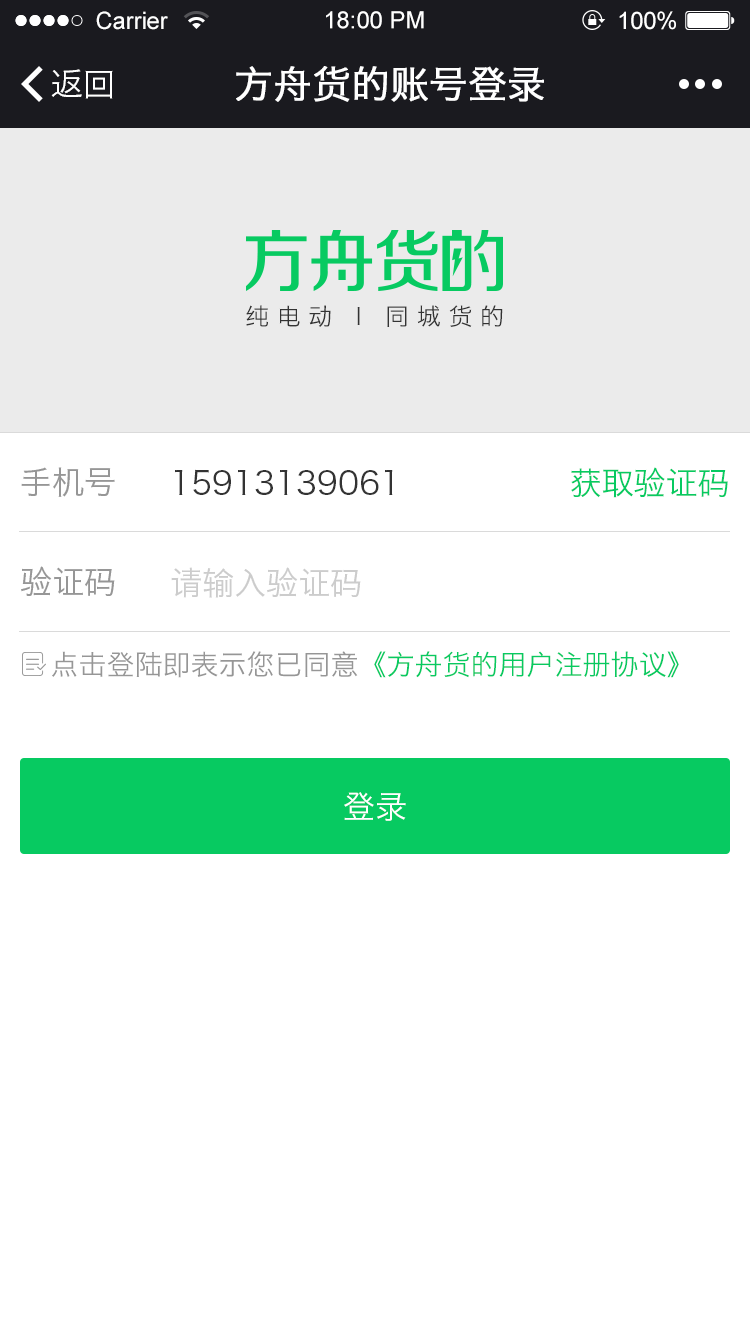
<style>
.page{position:relative;width:750px;height:1334px;background:#ffffff}
.page>*{position:absolute;margin:0}
.t1{font:24px "ArialMT";color:#fefefe}
.t2{font:23.7px "ArialMT";color:#ffffff}
.t3{font:24px "ArialMT";color:#ffffff}
.t4{font:32px "HiraginoSansGB-W3";color:#ffffff}
.t5{font:38px "HiraginoSansGB-W3";color:#ffffff;font-weight:bold}
.t6{font:23.9px "HiraginoSansGB-W3";letter-spacing:0.32em;color:#333333}
.t7{font:32px "HiraginoSansGB-W3";color:#969696}
.t8{font:32px "HiraginoSansGB-W3";color:#333333}
.t9{font:32px "HiraginoSansGB-W3";color:#07ca61}
.t10{font:32px "HiraginoSansGB-W3";color:#cccccc}
.t11{font:28px "HiraginoSansGB-W3";color:#07ca61}
.t12{font:28px "HiraginoSansGB-W3";color:#969696}
</style>
<div class="page">
<p class="t1" style="left:96px;top:11px;width:72px;height:19px">Carrier</p>
<p class="t2" style="left:326px;top:11px;width:98px;height:18px">18:00 PM</p>
<p class="t3" style="left:619px;top:11px;width:57px;height:19px">100%</p>
<p class="t4" style="left:51px;top:69px;width:62px;height:30px">返回</p>
<p class="t5" style="left:236px;top:66px;width:308px;height:36px">方舟货的账号登录</p>
<p class="t6" style="left:246px;top:305px;width:257px;height:22px">纯电动 l 同城货的</p>
<p class="t7" style="left:21px;top:467px;width:94px;height:30px">手机号</p>
<p class="t8" style="left:175px;top:469px;width:218px;height:26px">15913139061</p>
<p class="t9" style="left:571px;top:467px;width:157px;height:31px">获取验证码</p>
<p class="t7" style="left:21px;top:566px;width:94px;height:30px">验证码</p>
<p class="t10" style="left:171px;top:567px;width:190px;height:31px">请输入验证码</p>
<p class="t11" style="left:52px;top:651px;width:627px;height:27px"><span class="t12">点击登陆即表示您已同意</span>《方舟货的用户注册协议》</p>
<p class="t4" style="left:344px;top:792px;width:62px;height:29px">登录</p>
</div>
